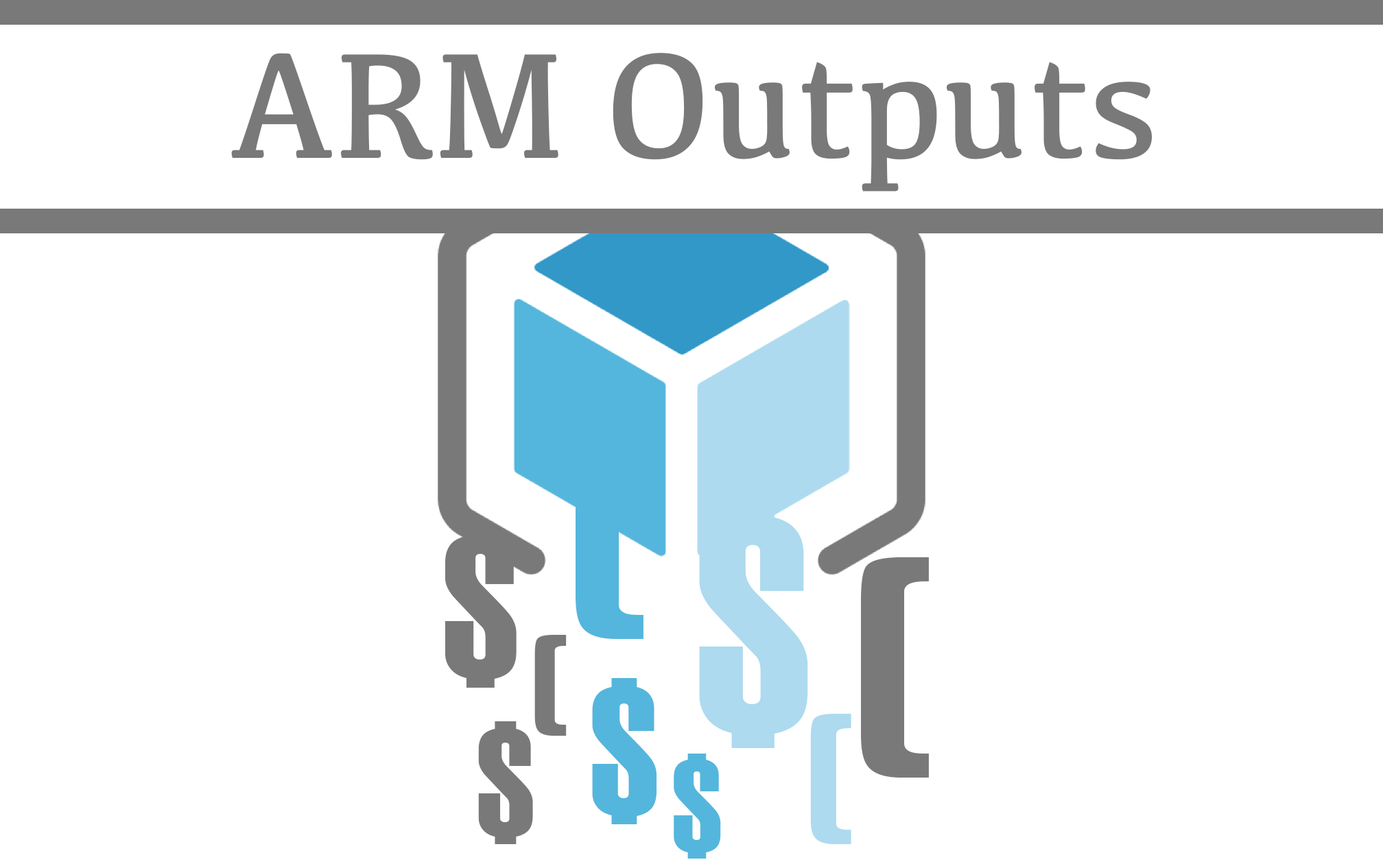
<style>
.page{position:relative;width:1383px;height:862px;background:#ffffff}
.page>*{position:absolute;margin:0}
.t1{font:155.1px "Kefa-Regular";color:#797979}
</style>
<div class="page">
<p class="t1" style="left:231px;top:53px;width:922px;height:138px">ARM Outputs</p>
</div>
